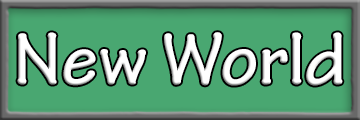
<style>
.page{position:relative;width:360px;height:120px;background:#49a771}
.page>*{position:absolute;margin:0}
.t1{font:78.6px "TektonPro-Bold";color:#ffffff}
</style>
<div class="page">
<p class="t1" style="left:17px;top:32px;width:326px;height:54px">New World</p>
</div>
